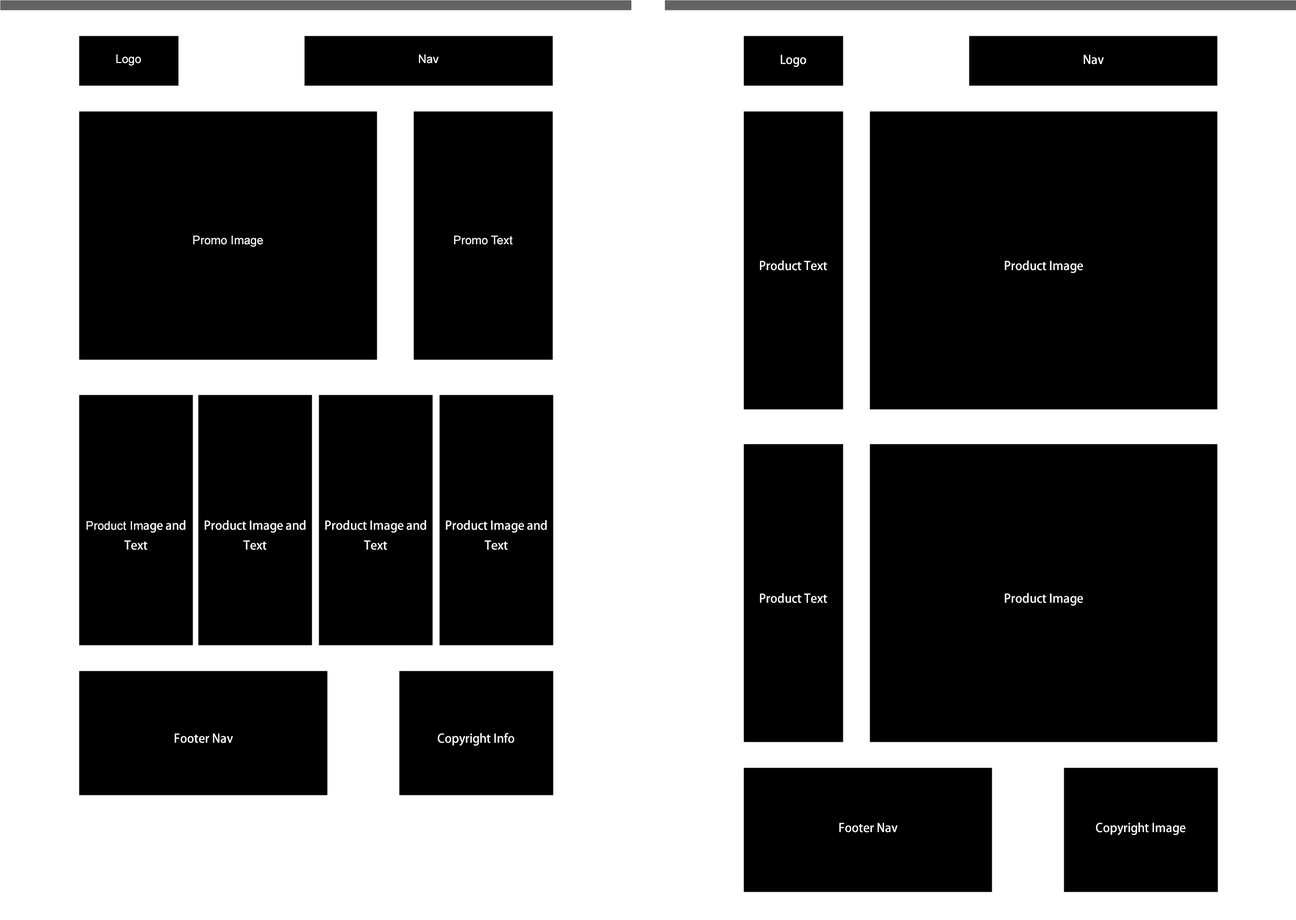
<style>
.page{position:relative;width:1296px;height:920px;background:#000000}
.page>*{position:absolute;margin:0}
.t1{font:11.9px "ArialMT";color:#ffffff}
.t2{font:11.9px "AdobeHeitiStd-Regular";color:#ffffff}
.t3{font:11.9px/19.9px "AdobeHeitiStd-Regular";color:#ffffff}
.t4{font:11.9px/19.9px "ArialMT";color:#ffffff}
</style>
<div class="page">
<p class="t1" style="left:116px;top:54px;width:25px;height:12px">Logo</p>
<p class="t1" style="left:419px;top:54px;width:20px;height:10px">Nav</p>
<p class="t2" style="left:781px;top:55px;width:25px;height:12px">Logo</p>
<p class="t2" style="left:1084px;top:55px;width:20px;height:10px">Nav</p>
<p class="t1" style="left:193px;top:235px;width:70px;height:12px">Promo Image</p>
<p class="t1" style="left:454px;top:235px;width:59px;height:10px">Promo Text</p>
<p class="t2" style="left:760px;top:260px;width:68px;height:11px">Product Text</p>
<p class="t2" style="left:1005px;top:260px;width:78px;height:13px">Product Image</p>
<p class="t3" style="left:86px;top:520px;width:100px;height:30px;text-align:center"><span class="t4">Product Im</span>age and Text</p>
<p class="t3" style="left:205px;top:520px;width:101px;height:30px;text-align:center">Product Image and Text</p>
<p class="t3" style="left:325px;top:520px;width:101px;height:30px;text-align:center">Product Image and Text</p>
<p class="t3" style="left:446px;top:520px;width:101px;height:30px;text-align:center">Product Image and Text</p>
<p class="t2" style="left:760px;top:593px;width:68px;height:10px">Product Text</p>
<p class="t2" style="left:1005px;top:593px;width:78px;height:13px">Product Image</p>
<p class="t2" style="left:175px;top:733px;width:58px;height:10px">Footer Nav</p>
<p class="t2" style="left:438px;top:733px;width:76px;height:13px">Copyright Info</p>
<p class="t2" style="left:839px;top:823px;width:59px;height:10px">Footer Nav</p>
<p class="t2" style="left:1096px;top:822px;width:90px;height:13px">Copyright Image</p>
</div>
